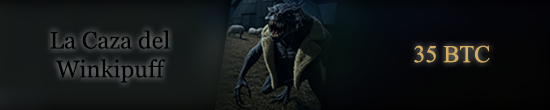
<style>
.page{position:relative;width:550px;height:110px}
.page>*{position:absolute;margin:0}
.t1{font:24px "Georgia";color:#000000}
.t2{font:24px "MongolianBaiti";color:#d3ad5b}
</style>
<div class="page">
<p class="t1" style="left:50px;top:30px;width:120px;height:53px;text-align:center">La Caza del Winkipuff</p>
<p class="t2" style="left:414px;top:45px;width:76px;height:18px">35 BTC</p>
</div>
